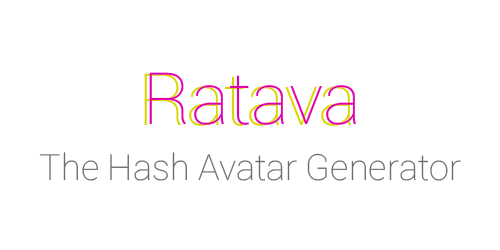
<style>
.page{position:relative;width:500px;height:250px;background:#ffffff}
.page>*{position:absolute;margin:0}
.t1{font:72px "Roboto-Thin";color:#dad700}
.t2{font:72px "Roboto-Thin";color:#e300ab}
.t3{font:36px "Roboto-Thin";color:#6d6d6d}
</style>
<div class="page">
<p class="t1" style="left:144px;top:73px;width:207px;height:53px">Ratava</p>
<p class="t2" style="left:149px;top:72px;width:207px;height:53px">Ratava</p>
<p class="t3" style="left:39px;top:152px;width:422px;height:29px">The Hash Avatar Generator</p>
</div>
